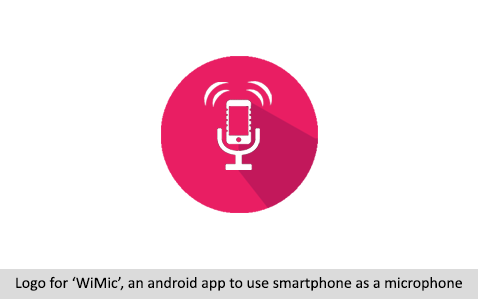
<style>
.page{position:relative;width:478px;height:299px;background:#ffffff}
.page>*{position:absolute;margin:0}
.t1{font:15.8px "Calibri";color:#000000}
</style>
<div class="page">
<p class="t1" style="left:16px;top:276px;width:446px;height:15px">Logo for ‘WiMic’, an android app to use smartphone as a microphone</p>
</div>
